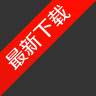
<style>
.page{position:relative;width:96px;height:96px;background:#333333}
.page>*{position:absolute;margin:0}
.t1{font:20px "FZZZHUNHJW--GB1-0";color:#ffffff}
</style>
<div class="page">
<p class="t1" style="left:5px;top:4px;width:66px;height:67px;rotate:-45deg">最新下载</p>
</div>
